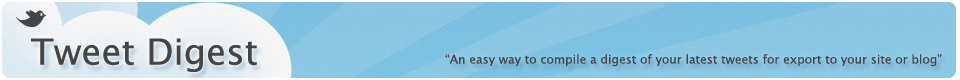
<style>
.page{position:relative;width:960px;height:80px}
.page>*{position:absolute;margin:0}
.t1{font:36px "LucidaGrande";color:#434547}
.t2{font:12px "LucidaGrande";color:#434547}
</style>
<div class="page">
<p class="t1" style="left:31px;top:38px;width:226px;height:34px">Tweet Digest</p>
<p class="t2" style="left:445px;top:54px;width:497px;height:13px">“An easy way to compile a digest of your latest tweets for export to your site or blog”</p>
</div>
